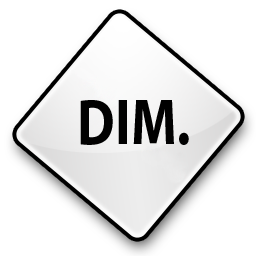
<style>
.page{position:relative;width:256px;height:256px;background:#ffffff}
.page>*{position:absolute;margin:0}
.t1{font:66px "MyriadPro-Bold";letter-spacing:0.005em;color:#010101;scale:0.82 1}
</style>
<div class="page">
<p class="t1" style="left:80px;top:100px;width:109px;height:45px">DIM.</p>
</div>
